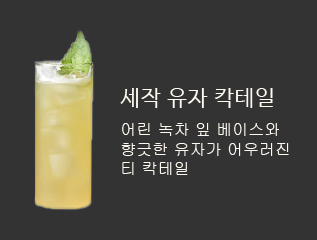
<style>
.page{position:relative;width:317px;height:240px;background:#333333}
.page>*{position:absolute;margin:0}
.t1{font:22px "HanSantteutDotumRegular";color:#fffaf0;text-transform:uppercase}
.t2{font:16px "Gulim";color:#fffaf0;text-transform:uppercase}
</style>
<div class="page">
<p class="t1" style="left:120px;top:88px;width:153px;height:20px">세작 유자 칵테일</p>
<p class="t2" style="left:121px;top:123px;width:168px;height:52px">어린 녹차 잎 베이스와<br>향긋한 유자가 어우러진<br>티 칵테일</p>
</div>
